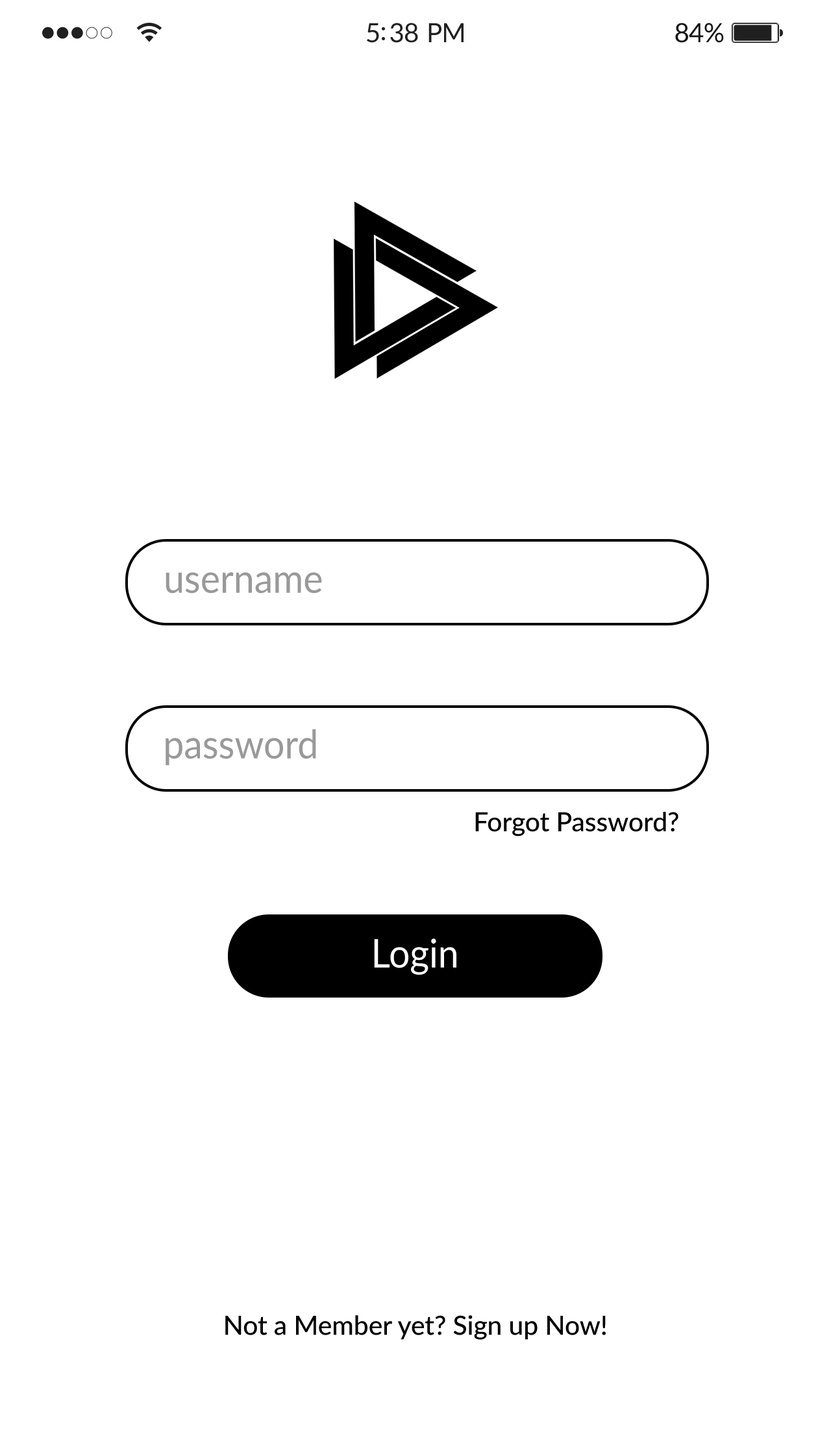
<style>
.page{position:relative;width:831px;height:1434px;background:#ffffff}
.page>*{position:absolute;margin:0}
.t1{font:26.4px "Lato-Regular";letter-spacing:-0.02em;color:#202020}
.t2{font:26.4px "Lato-Regular";letter-spacing:-0.02em;color:#161616}
.t3{font:39.6px "Lato-Regular";color:#999999;scale:0.94 1}
.t4{font:26.4px "Lato-Medium";color:#000000}
.t5{font:39.6px "Lato-Regular";color:#ffffff;scale:0.94 1}
</style>
<div class="page">
<p class="t1" style="left:367px;top:23px;width:97px;height:20px">5:38 PM</p>
<p class="t2" style="left:676px;top:23px;width:48px;height:20px">84%</p>
<p class="t3" style="left:166px;top:572px;width:156px;height:22px">username</p>
<p class="t3" style="left:166px;top:729px;width:150px;height:37px">password</p>
<p class="t4" style="left:475px;top:812px;width:204px;height:25px">Forgot Password?</p>
<p class="t5" style="left:374px;top:939px;width:83px;height:36px">Login</p>
<p class="t4" style="left:225px;top:1315px;width:381px;height:25px">Not a Member yet? Sign up Now!</p>
</div>
